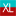
<style>
.page{position:relative;width:16px;height:16px;background:#b00b0b}
.page>*{position:absolute;margin:0}
.t1{font:10.9px "CaviarDreams"}
</style>
<div class="page">
<p class="t1" style="left:2px;top:3px;width:12px;height:10px">XL</p>
</div>
